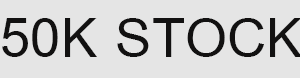
<style>
.page{position:relative;width:300px;height:78px;background:#e5e5e5}
.page>*{position:absolute;margin:0}
.t1{font:83.3px "BrowalliaNew";color:#121111}
</style>
<div class="page">
<p class="t1" style="left:2px;top:18px;width:300px;height:39px">50K STOCK</p>
</div>
